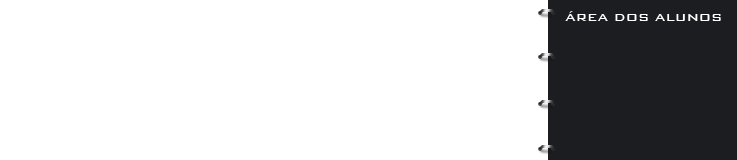
<style>
.page{position:relative;width:737px;height:160px;background:#ffffff}
.page>*{position:absolute;margin:0}
.t1{font:14px "BankGothicBT-Medium";color:#ffffff}
</style>
<div class="page">
<p class="t1" style="left:565px;top:11px;width:156px;height:10px">ÁREA DOS ALUNOS</p>
</div>
